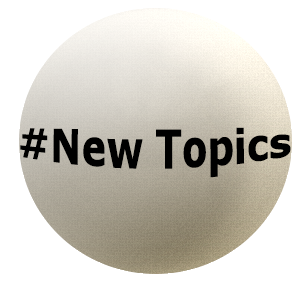
<style>
.page{position:relative;width:306px;height:290px;background:#ffffff}
.page>*{position:absolute;margin:0}
.t1{font:37.5px "Verdana-Bold";color:#000000}
</style>
<div class="page">
<p class="t1" style="left:20px;top:127px;width:271px;height:51px">#New Topics</p>
</div>
